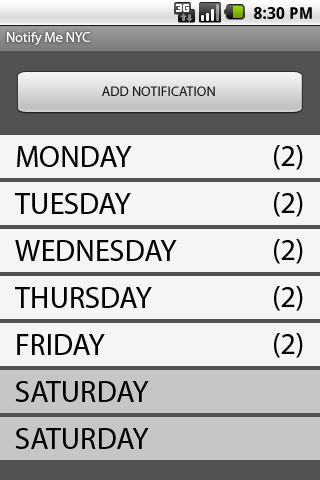
<style>
.page{position:relative;width:320px;height:480px;background:#f5f5f5}
.page>*{position:absolute;margin:0}
.t1{font:16px "DroidSans-Bold";letter-spacing:0.005em;color:#000000}
.t2{font:14px "MyriadPro-Regular";color:#ffffff}
.t3{font:14px "MyriadPro-Regular";color:#111111}
.t4{font:30px "MyriadPro-Regular";color:#000000}
</style>
<div class="page">
<p class="t1" style="left:254px;top:7px;width:58px;height:12px">8:30 PM</p>
<p class="t2" style="left:7px;top:32px;width:83px;height:13px">Notify Me NYC</p>
<p class="t3" style="left:102px;top:86px;width:113px;height:10px">ADD NOTIFICATION</p>
<p class="t4" style="left:17px;top:146px;width:115px;height:21px">MONDAY</p>
<p class="t4" style="left:274px;top:145px;width:29px;height:25px">(2)</p>
<p class="t4" style="left:15px;top:193px;width:116px;height:21px">TUESDAY</p>
<p class="t4" style="left:274px;top:192px;width:29px;height:25px">(2)</p>
<p class="t4" style="left:15px;top:240px;width:162px;height:21px">WEDNESDAY</p>
<p class="t4" style="left:274px;top:239px;width:29px;height:25px">(2)</p>
<p class="t4" style="left:15px;top:287px;width:137px;height:21px">THURSDAY</p>
<p class="t4" style="left:274px;top:286px;width:29px;height:25px">(2)</p>
<p class="t4" style="left:17px;top:334px;width:88px;height:21px">FRIDAY</p>
<p class="t4" style="left:274px;top:333px;width:29px;height:25px">(2)</p>
<p class="t4" style="left:15px;top:381px;width:134px;height:21px">SATURDAY</p>
<p class="t4" style="left:15px;top:428px;width:134px;height:21px">SATURDAY</p>
</div>
